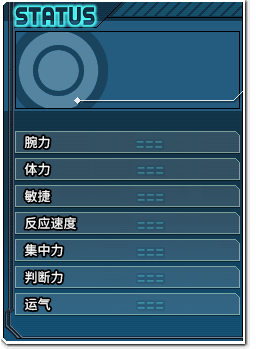
<style>
.page{position:relative;width:256px;height:349px}
.page>*{position:absolute;margin:0}
.t1{font:13px "Resource-Han-Rounded-CN-Regular";color:#ffffff}
</style>
<div class="page">
<p class="t1" style="left:24px;top:136px;width:26px;height:13px">腕力</p>
<p class="t1" style="left:24px;top:163px;width:26px;height:13px">体力</p>
<p class="t1" style="left:24px;top:190px;width:27px;height:13px">敏捷</p>
<p class="t1" style="left:25px;top:216px;width:51px;height:14px">反应速度</p>
<p class="t1" style="left:25px;top:244px;width:38px;height:13px">集中力</p>
<p class="t1" style="left:25px;top:271px;width:38px;height:13px">判断力</p>
<p class="t1" style="left:25px;top:298px;width:26px;height:13px">运气</p>
</div>
